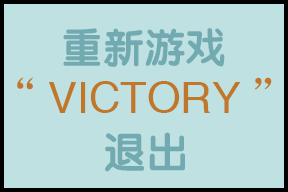
<style>
.page{position:relative;width:288px;height:192px;background:#bfe1e1}
.page>*{position:absolute;margin:0}
.t1{font:41.4px "FZY4JW--GB1-0";color:#72aab1}
.t2{font:43.5px "CTZhongYuanSJ";color:#c07729}
.t3{font:42.7px "FZY4JW--GB1-0";color:#72aab1}
</style>
<div class="page">
<p class="t1" style="left:63px;top:28px;width:162px;height:39px">重新游戏</p>
<p class="t2" style="left:17px;top:77px;width:255px;height:36px">“VICTORY”</p>
<p class="t3" style="left:105px;top:132px;width:80px;height:40px">退出</p>
</div>
